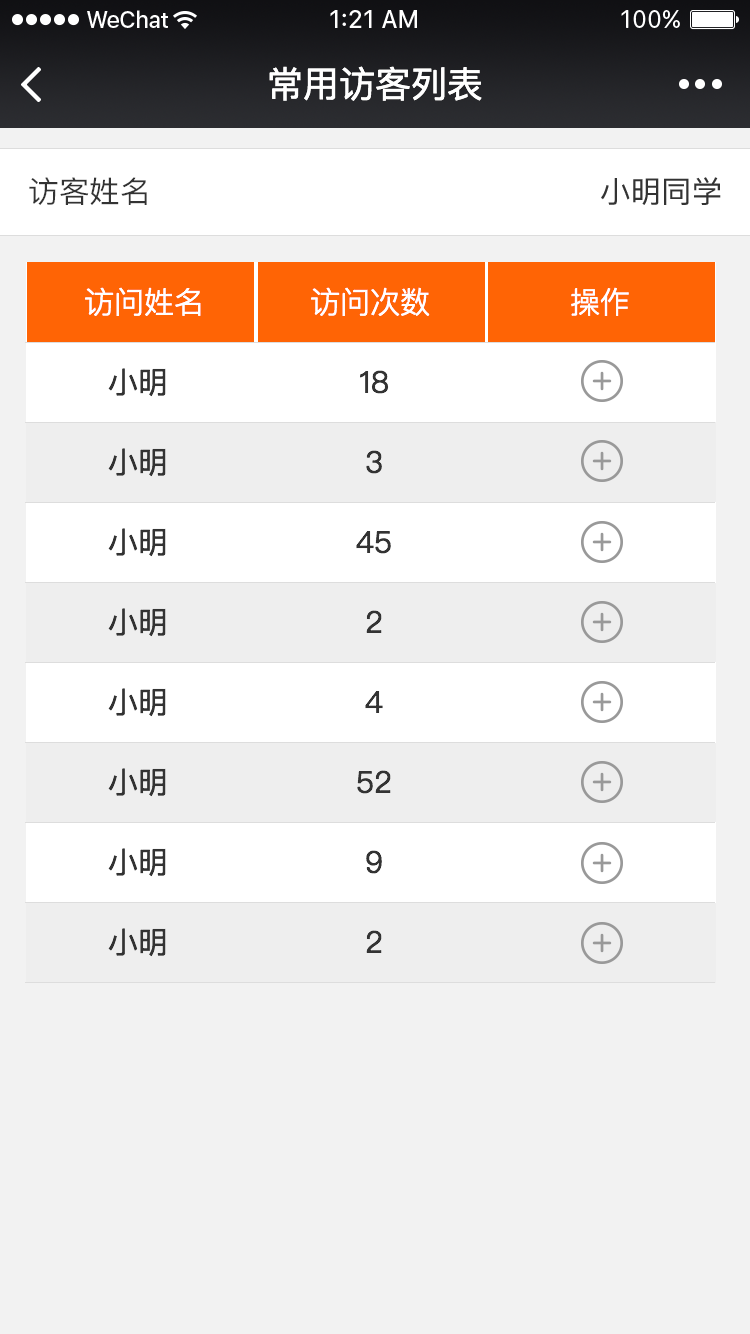
<style>
.page{position:relative;width:750px;height:1334px;background:#f2f2f2}
.page>*{position:absolute;margin:0}
.t1{font:36px "PingFangSC-Regular";color:#ffffff}
.t2{font:30px "PingFangSC-Regular";color:#333333}
.t3{font:30px "PingFang-SC-Medium";color:#333333}
.t4{font:30px "PingFangSC-Light";color:#ffffff}
</style>
<div class="page">
<p class="t1" style="left:269px;top:66px;width:213px;height:35px">常用访客列表</p>
<p class="t2" style="left:29px;top:177px;width:118px;height:28px">访客姓名</p>
<p class="t3" style="left:601px;top:177px;width:120px;height:28px">小明同学</p>
<p class="t4" style="left:85px;top:287px;width:116px;height:29px">访问姓名</p>
<p class="t4" style="left:311px;top:287px;width:119px;height:29px">访问次数</p>
<p class="t4" style="left:571px;top:287px;width:58px;height:29px">操作</p>
<p class="t2" style="left:108px;top:368px;width:58px;height:29px">小明</p>
<p class="t2" style="left:360px;top:370px;width:29px;height:24px">18</p>
<p class="t2" style="left:108px;top:448px;width:58px;height:29px">小明</p>
<p class="t2" style="left:366px;top:450px;width:16px;height:24px">3</p>
<p class="t2" style="left:108px;top:528px;width:58px;height:29px">小明</p>
<p class="t2" style="left:356px;top:531px;width:35px;height:23px">45</p>
<p class="t2" style="left:108px;top:608px;width:58px;height:29px">小明</p>
<p class="t2" style="left:366px;top:610px;width:16px;height:23px">2</p>
<p class="t2" style="left:108px;top:688px;width:58px;height:29px">小明</p>
<p class="t2" style="left:365px;top:691px;width:18px;height:22px">4</p>
<p class="t2" style="left:108px;top:768px;width:58px;height:29px">小明</p>
<p class="t2" style="left:357px;top:770px;width:34px;height:24px">52</p>
<p class="t2" style="left:108px;top:848px;width:58px;height:29px">小明</p>
<p class="t2" style="left:366px;top:850px;width:16px;height:24px">9</p>
<p class="t2" style="left:108px;top:928px;width:58px;height:29px">小明</p>
<p class="t2" style="left:366px;top:930px;width:16px;height:23px">2</p>
</div>
